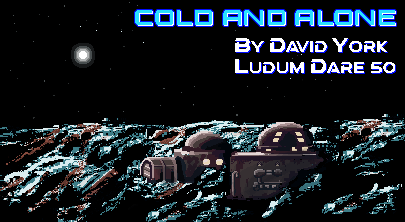
<style>
.page{position:relative;width:405px;height:222px;background:#000000}
.page>*{position:absolute;margin:0}
.t1{font:14px "aAtmospheric";letter-spacing:0.025em;color:#ffffff}
.t2{font:18px "aAtmospheric";letter-spacing:0.025em;color:#ffffff}
.t3{font:14px "aAtmospheric";letter-spacing:0.025em}
.t4{font:18px "aAtmospheric";letter-spacing:0.025em}
</style>
<div class="page">
<p class="t1" style="left:235px;top:38px;width:160px;height:35px"><span class="t2">B</span>y <span class="t2">D</span>Avid <span class="t2">Y</span>ork<br><span class="t2">L</span>udum <span class="t2">D</span>are 50</p>
<p class="t3" style="left:236px;top:39px;width:160px;height:35px"><span class="t4">B</span>y <span class="t4">D</span>Avid <span class="t4">Y</span>ork<br><span class="t4">L</span>udum <span class="t4">D</span>are 50</p>
</div>
